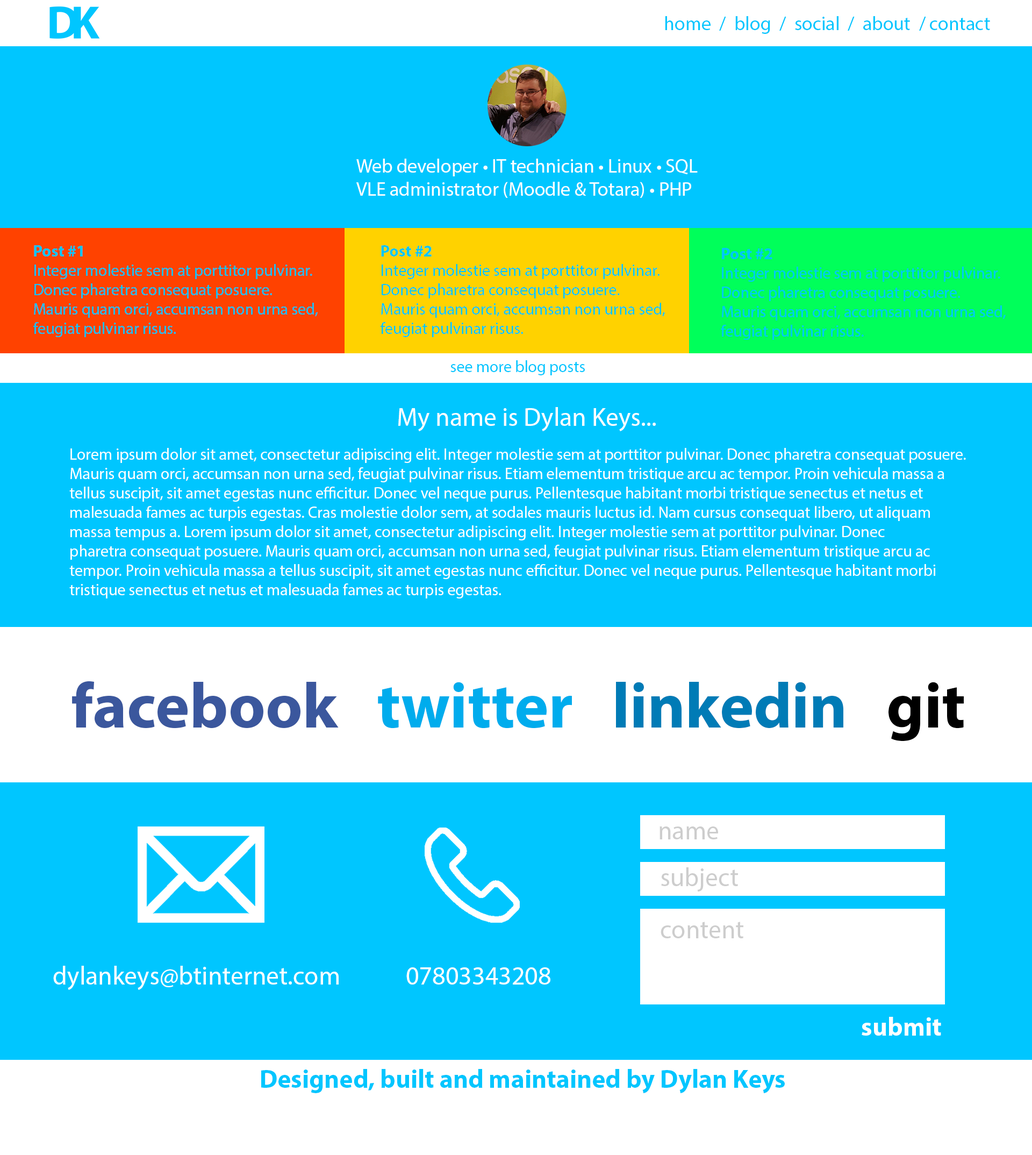
<style>
.page{position:relative;width:1032px;height:1155px;background:#00c6ff}
.page>*{position:absolute;margin:0}
.t1{font:19.4px "MyriadPro-Regular";color:#00c6ff}
.t2{font:19.4px "MyriadPro-Regular";color:#ffffff}
.t3{font:16.1px "MyriadPro-Regular";color:#00c6ff}
.t4{font:16.1px "MyriadPro-Bold";color:#00c6ff}
.t5{font:25.8px "MyriadPro-Regular";color:#ffffff}
.t6{font:16.1px "MyriadPro-Regular";color:#ffffff}
.t7{font:64.5px "MyriadPro-Bold";color:#3b579d}
.t8{font:64.5px "MyriadPro-Bold";color:#00aced}
.t9{font:64.5px "MyriadPro-Bold";color:#007bb6}
.t10{font:64.5px "MyriadPro-Bold";color:#000000}
.t11{font:25.8px "MyriadPro-Regular";color:#cdcdcd}
.t12{font:25.8px "MyriadPro-Bold";color:#ffffff}
.t13{font:25.8px "MyriadPro-Bold";color:#00c6ff}
</style>
<div class="page">
<p class="t1" style="left:665px;top:16px;width:325px;height:18px">home  /  blog  /  social  /  about  / contact</p>
<p class="t2" style="left:357px;top:159px;width:341px;height:39px">Web developer • IT technician • Linux • SQL<br>VLE administrator (Moodle &amp; Totara) • PHP</p>
<p class="t3" style="left:33px;top:245px;width:285px;height:92px"><span class="t4">Post #1<br></span>Integer molestie sem at porttitor pulvinar.<br>Donec pharetra consequat posuere.<br>Mauris quam orci, accumsan non urna sed,<br>feugiat pulvinar risus.</p>
<p class="t3" style="left:381px;top:245px;width:284px;height:92px"><span class="t4">Post #2<br></span>Integer molestie sem at porttitor pulvinar.<br>Donec pharetra consequat posuere.<br>Mauris quam orci, accumsan non urna sed,<br>feugiat pulvinar risus.</p>
<p class="t3" style="left:721px;top:248px;width:285px;height:92px"><span class="t4">Post #2<br></span>Integer molestie sem at porttitor pulvinar.<br>Donec pharetra consequat posuere.<br>Mauris quam orci, accumsan non urna sed,<br>feugiat pulvinar risus.</p>
<p class="t3" style="left:451px;top:360px;width:134px;height:15px">see more blog posts</p>
<p class="t5" style="left:398px;top:407px;width:258px;height:24px">My name is Dylan Keys...</p>
<p class="t6" style="left:69px;top:448px;width:897px;height:150px">Lorem ipsum dolor sit amet, consectetur adipiscing elit. Integer molestie sem at porttitor pulvinar. Donec pharetra consequat posuere.<br>Mauris quam orci, accumsan non urna sed, feugiat pulvinar risus. Etiam elementum tristique arcu ac tempor. Proin vehicula massa a<br>tellus suscipit, sit amet egestas nunc efficitur. Donec vel neque purus. Pellentesque habitant morbi tristique senectus et netus et<br>malesuada fames ac turpis egestas. Cras molestie dolor sem, at sodales mauris luctus id. Nam cursus consequat libero, ut aliquam<br>massa tempus a. Lorem ipsum dolor sit amet, consectetur adipiscing elit. Integer molestie sem at porttitor pulvinar. Donec<br>pharetra consequat posuere. Mauris quam orci, accumsan non urna sed, feugiat pulvinar risus. Etiam elementum tristique arcu ac<br>tempor. Proin vehicula massa a tellus suscipit, sit amet egestas nunc efficitur. Donec vel neque purus. Pellentesque habitant morbi<br>tristique senectus et netus et malesuada fames ac turpis egestas.</p>
<p class="t7" style="left:72px;top:681px;width:893px;height:61px">facebook   <span class="t8">twitter   </span><span class="t9">linkedin   </span><span class="t10">git</span></p>
<p class="t11" style="left:660px;top:826px;width:58px;height:13px">name</p>
<p class="t11" style="left:661px;top:867px;width:77px;height:25px">subject</p>
<p class="t11" style="left:661px;top:922px;width:83px;height:16px">content</p>
<p class="t5" style="left:53px;top:966px;width:498px;height:24px">dylankeys@btinternet.com            07803343208</p>
<p class="t12" style="left:862px;top:1017px;width:80px;height:19px">submit</p>
<p class="t13" style="left:261px;top:1069px;width:524px;height:24px">Designed, built and maintained by Dylan Keys</p>
</div>
